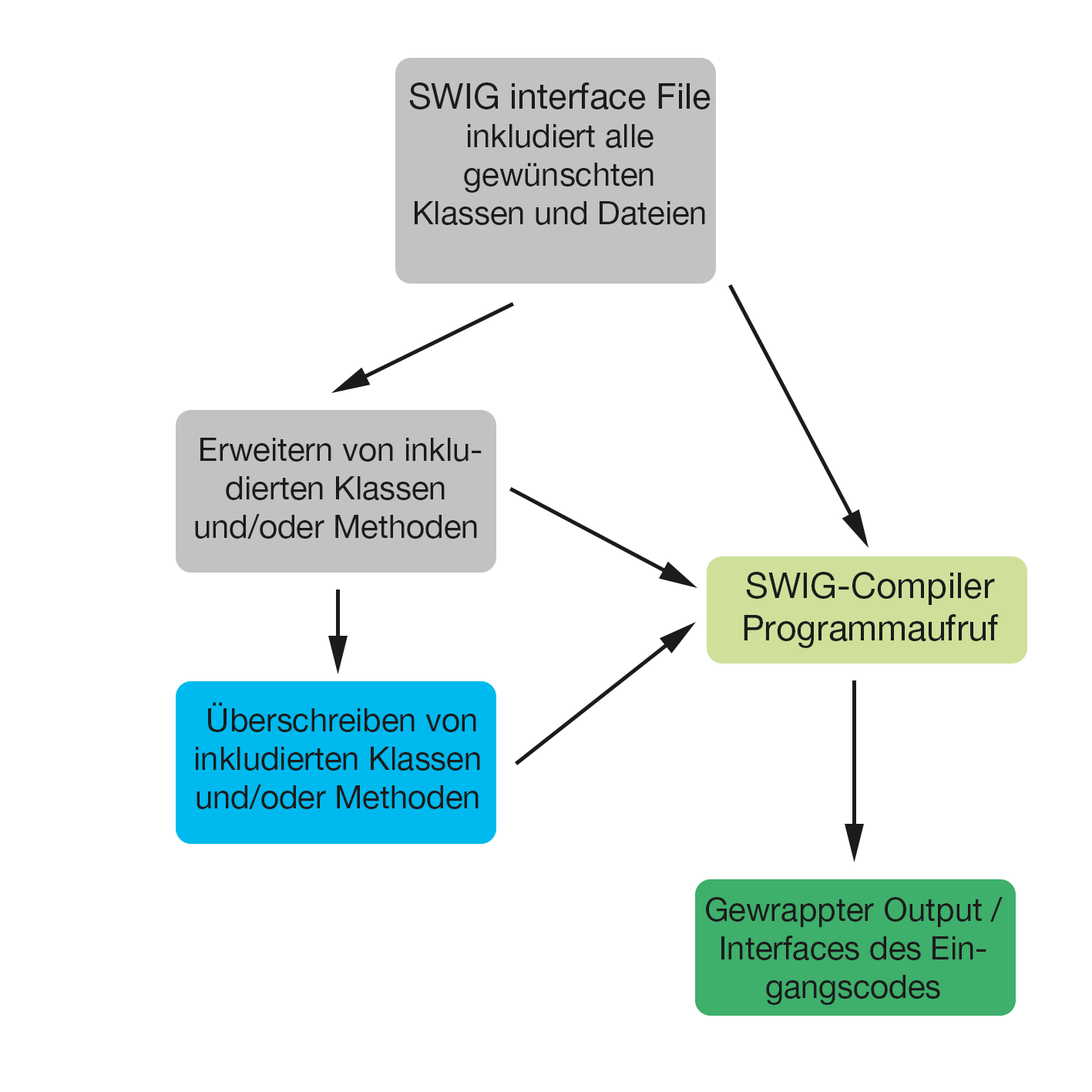
<style>
.page{position:relative;width:1092px;height:1092px;background:#ffffff}
.page>*{position:absolute;margin:0}
.t1{font:32.1px "HelveticaNeueLTPro-Roman";color:#1b1b1b}
.t2{font:35.3px "HelveticaNeueLTPro-Roman";color:#1b1b1b}
</style>
<div class="page">
<p class="t1" style="left:409px;top:82px;width:302px;height:143px;text-align:center"><span class="t2">SWIG interface File<br></span>inkludiert alle <br>gewünschten<br>Klassen und Dateien</p>
<p class="t1" style="left:195px;top:438px;width:287px;height:101px;text-align:center">Erweitern von inkludierten Klassen und/oder Methoden</p>
<p class="t2" style="left:744px;top:572px;width:255px;height:76px;text-align:center">SWIG-Compiler<br>Programmaufruf</p>
<p class="t1" style="left:196px;top:702px;width:284px;height:107px;text-align:center">Überschreiben von inkludierten Klassen und/oder Methoden</p>
<p class="t1" style="left:706px;top:897px;width:297px;height:108px;text-align:center">Gewrappter Output / Interfaces des Eingangscodes</p>
</div>
